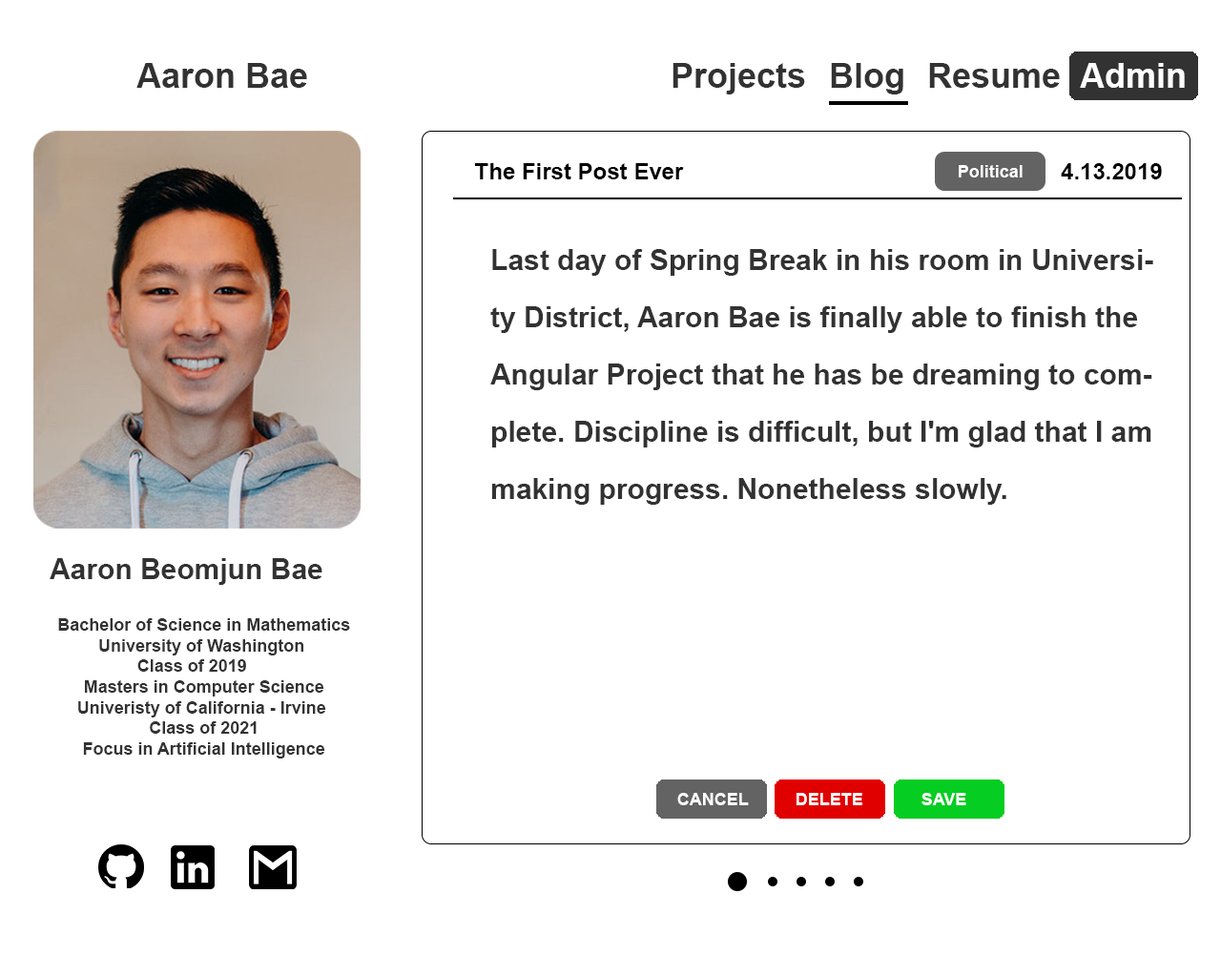
<style>
.page{position:relative;width:1221px;height:977px;background:#ffffff}
.page>*{position:absolute;margin:0}
.t1{font:34.3px "Arial-BoldMT";color:#323232}
.t2{font:22.9px "Arial-BoldMT";color:#000000}
.t3{font:17.2px "Arial-BoldMT";color:#ffffff}
.t4{font:28.6px/57.2px "Arial-BoldMT";color:#323232}
.t5{font:28.6px "Arial-BoldMT";color:#323232}
.t6{font:17.2px "Arial-BoldMT";color:#323232}
</style>
<div class="page">
<p class="t1" style="left:136px;top:63px;width:171px;height:25px">Aaron Bae</p>
<p class="t1" style="left:672px;top:63px;width:133px;height:31px">Projects</p>
<p class="t1" style="left:831px;top:63px;width:72px;height:31px">Blog</p>
<p class="t1" style="left:929px;top:63px;width:131px;height:25px">Resume</p>
<p class="t2" style="left:475px;top:163px;width:209px;height:16px">The First Post Ever</p>
<p class="t3" style="left:959px;top:165px;width:63px;height:12px">Political</p>
<p class="t2" style="left:1061px;top:163px;width:101px;height:16px">4.13.2019</p>
<p class="t4" style="left:490px;top:249px;width:663px;height:256px">Last day of Spring Break in his room in University District, Aaron Bae is finally able to finish the Angular Project that he has be dreaming to complete. Discipline is difficult, but I'm glad that I am making progress. Nonetheless slowly.</p>
<p class="t5" style="left:50px;top:558px;width:272px;height:27px">Aaron Beomjun Bae</p>
<p class="t6" style="left:58px;top:618px;width:292px;height:140px;text-align:center">Bachelor of Science in Mathematics<br>University of Washington <br>Class of 2019     <br>Masters in Computer Science<br>Univeristy of California - Irvine <br>Class of 2021<br>Focus in Artificial Intelligence</p>
<p class="t3" style="left:677px;top:793px;width:72px;height:12px">CANCEL</p>
<p class="t3" style="left:796px;top:793px;width:66px;height:12px">DELETE</p>
<p class="t3" style="left:921px;top:793px;width:45px;height:12px">SAVE</p>
</div>
